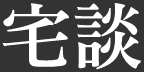
<style>
.page{position:relative;width:144px;height:72px;background:#333333}
.page>*{position:absolute;margin:0}
.t1{font:72px "DFMinchoP-W5-WIN-RKSJ-H";color:#ffffff}
</style>
<div class="page">
<p class="t1" style="left:2px;top:3px;width:139px;height:67px">宅談</p>
</div>
